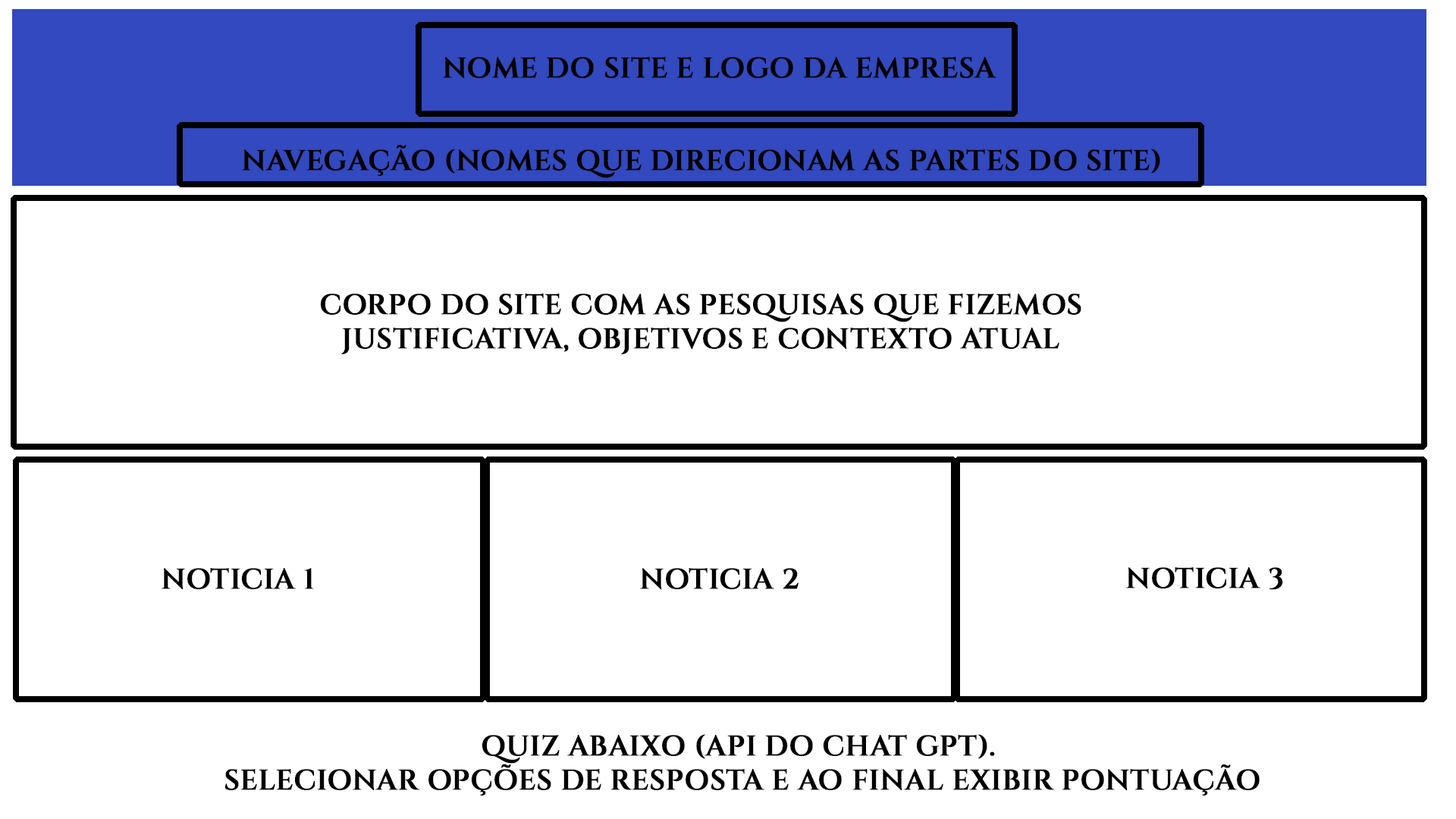
<style>
.page{position:relative;width:1456px;height:819px;background:#ffffff}
.page>*{position:absolute;margin:0}
.t1{font:28.4px "Cinzel-SemiBold";color:#000000;font-weight:bold}
</style>
<div class="page">
<p class="t1" style="left:443px;top:57px;width:553px;height:22px">NOME DO SITE E LOGO DA EMPRESA</p>
<p class="t1" style="left:242px;top:145px;width:918px;height:33px">NAVEGAÇÃO (NOMES QUE DIRECIONAM AS PARTES DO SITE)</p>
<p class="t1" style="left:320px;top:293px;width:761px;height:61px;text-align:center">CORPO DO SITE COM AS PESQUISAS QUE FIZEMOS<br>JUSTIFICATIVA, OBJETIVOS E CONTEXTO ATUAL</p>
<p class="t1" style="left:162px;top:568px;width:152px;height:21px">NOTICIA 1</p>
<p class="t1" style="left:640px;top:568px;width:159px;height:21px">NOTICIA 2</p>
<p class="t1" style="left:1126px;top:567px;width:157px;height:23px">NOTICIA 3</p>
<p class="t1" style="left:225px;top:734px;width:1035px;height:61px;text-align:center">QUIZ ABAIXO (API DO CHAT GPT).<br> SELECIONAR OPÇÕES DE RESPOSTA E AO FINAL EXIBIR PONTUAÇÃO</p>
</div>
